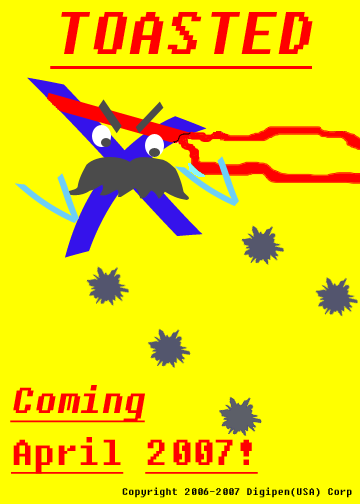
<style>
.page{position:relative;width:360px;height:504px;background:#ffff00}
.page>*{position:absolute;margin:0}
.t1{font:59.8px "Fixedsys";color:#ff0000;font-style:italic;text-decoration:underline}
.t2{font:35.9px "Fixedsys";color:#ff0000;font-style:italic;text-decoration:underline}
.t3{font:35.9px "Fixedsys";color:#ff0000;text-decoration:underline}
.t4{font:10px "Fixedsys";color:#000000}
</style>
<div class="page">
<p class="t1" style="left:50px;top:12px;width:263px;height:57px">TOASTED</p>
<p class="t2" style="left:10px;top:385px;width:135px;height:38px">Coming</p>
<p class="t3" style="left:11px;top:437px;width:247px;height:37px">April 2007!</p>
<p class="t4" style="left:122px;top:487px;width:230px;height:11px">Copyright 2006-2007 Digipen(USA) Corp</p>
</div>
